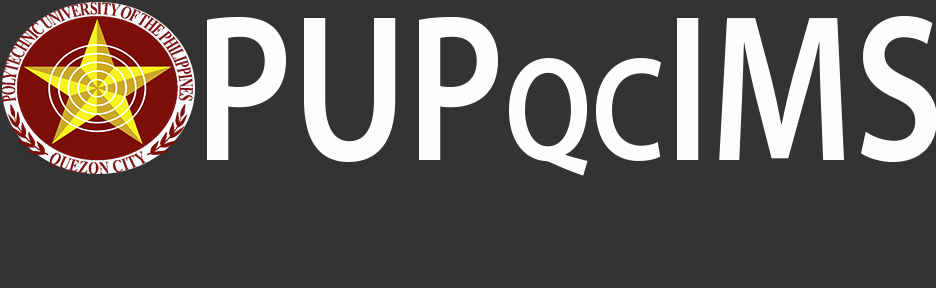
<style>
.page{position:relative;width:936px;height:288px;background:#333333}
.page>*{position:absolute;margin:0}
.t1{font:210px "MyriadPro-Semibold";color:#fbfbfb;scale:0.83 1}
.t2{font:150px "MyriadPro-Semibold";color:#fbfbfb;scale:0.83 1}
</style>
<div class="page">
<p class="t1" style="left:207px;top:16px;width:730px;height:160px">PUP<span class="t2">QC</span>IMS</p>
</div>
